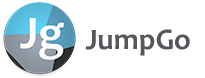
<style>
.page{position:relative;width:205px;height:78px;background:#ffffff}
.page>*{position:absolute;margin:0}
.t1{font:30px "Candara-Bold";color:#56575c}
</style>
<div class="page">
<p class="t1" style="left:85px;top:29px;width:105px;height:27px">JumpGo</p>
</div>
